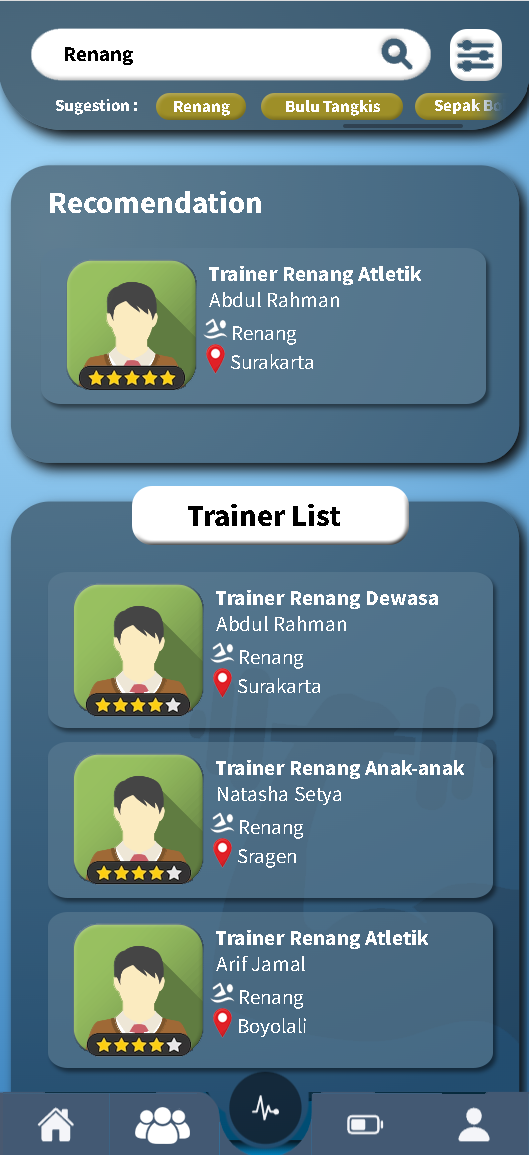
<style>
.page{position:relative;width:529px;height:1155px}
.page>*{position:absolute;margin:0}
.t1{font:21px "SourceSansPro-Bold";color:#000000}
.t2{font:17px "SourceSansPro-Bold";color:#ffffff}
.t3{font:31px "SourceSansPro-Bold";color:#ffffff}
.t4{font:21.3px "SourceSansPro-Bold";color:#ffffff}
.t5{font:21.3px "SourceSansPro-Regular";color:#ffffff}
.t6{font:21px "SourceSansPro-Regular";color:#ffffff}
.t7{font:31px "SourceSansPro-Bold";color:#000000}
</style>
<div class="page">
<p class="t1" style="left:65px;top:47px;width:68px;height:18px">Renang</p>
<p class="t2" style="left:56px;top:99px;width:81px;height:16px">Sugestion :</p>
<p class="t2" style="left:174px;top:101px;width:56px;height:15px">Renang</p>
<p class="t2" style="left:286px;top:100px;width:94px;height:16px">Bulu Tangkis</p>
<p class="t3" style="left:50px;top:191px;width:211px;height:22px">Recomendation</p>
<p class="t4" style="left:209px;top:266px;width:212px;height:19px">Trainer Renang Atletik</p>
<p class="t5" style="left:209px;top:292px;width:130px;height:15px">Abdul Rahman</p>
<p class="t6" style="left:233px;top:326px;width:63px;height:19px">Renang</p>
<p class="t6" style="left:231px;top:354px;width:82px;height:15px">Surakarta</p>
<p class="t7" style="left:188px;top:504px;width:152px;height:22px">Trainer List</p>
<p class="t4" style="left:216px;top:590px;width:222px;height:19px">Trainer Renang Dewasa</p>
<p class="t5" style="left:216px;top:616px;width:130px;height:15px">Abdul Rahman</p>
<p class="t6" style="left:240px;top:650px;width:63px;height:19px">Renang</p>
<p class="t6" style="left:238px;top:678px;width:82px;height:15px">Surakarta</p>
<p class="t4" style="left:216px;top:760px;width:248px;height:19px">Trainer Renang Anak-anak</p>
<p class="t5" style="left:218px;top:786px;width:123px;height:19px">Natasha Setya</p>
<p class="t6" style="left:240px;top:820px;width:63px;height:19px">Renang</p>
<p class="t6" style="left:238px;top:849px;width:58px;height:19px">Sragen</p>
<p class="t4" style="left:216px;top:930px;width:212px;height:19px">Trainer Renang Atletik</p>
<p class="t5" style="left:216px;top:956px;width:89px;height:15px">Arif Jamal</p>
<p class="t6" style="left:240px;top:990px;width:63px;height:19px">Renang</p>
<p class="t6" style="left:239px;top:1018px;width:67px;height:19px">Boyolali</p>
</div>
